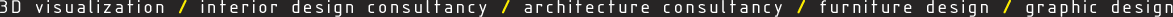
<style>
.page{position:relative;width:1173px;height:17px;background:#272525}
.page>*{position:absolute;margin:0}
.t1{font:20px "ISOCPEUR";letter-spacing:0.1em;color:#fefefe;scale:1.08 1}
.t2{font:20px "ISOCPEUR";letter-spacing:0.1em;color:#fced00;font-weight:bold;scale:1.08 1}
</style>
<div class="page">
<p class="t1" style="left:0px;top:0px;width:1173px;height:17px">3D visualization <span class="t2">/</span> interior design consultancy <span class="t2">/</span> architecture consultancy <span class="t2">/</span> furniture design <span class="t2">/</span> graphic design</p>
</div>
